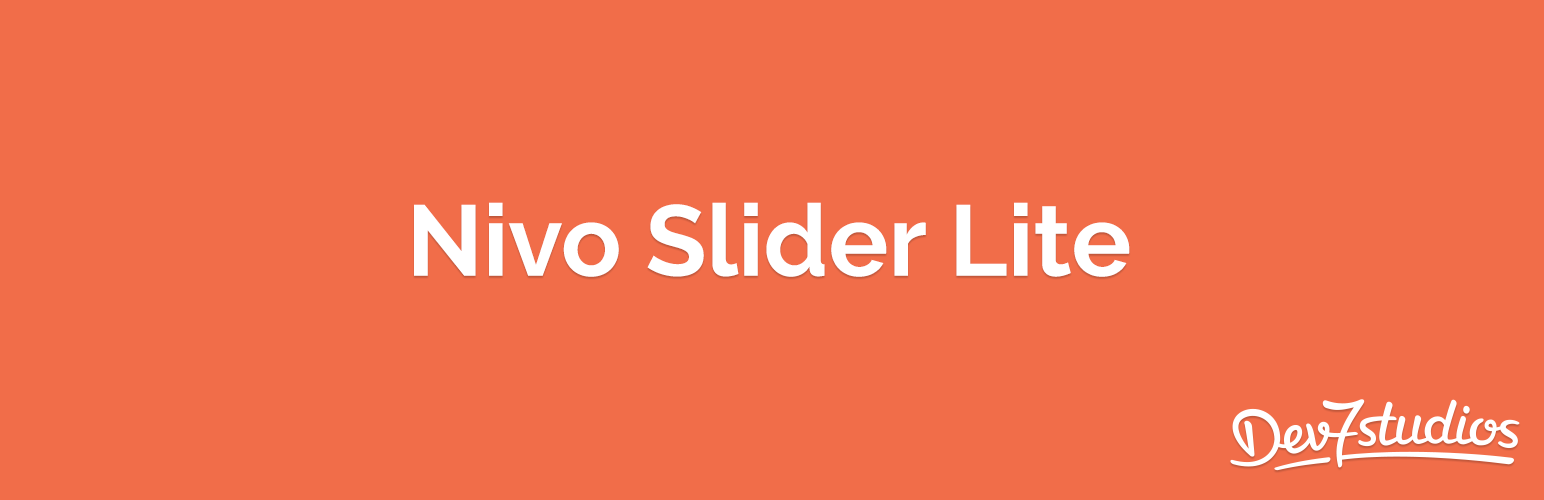
<style>
.page{position:relative;width:1544px;height:500px;background:#f16d49}
.page>*{position:absolute;margin:0}
.t1{font:100px "Raleway-Bold";color:#ffffff}
</style>
<div class="page">
<p class="t1" style="left:414px;top:202px;width:716px;height:75px">Nivo Slider Lite</p>
</div>
